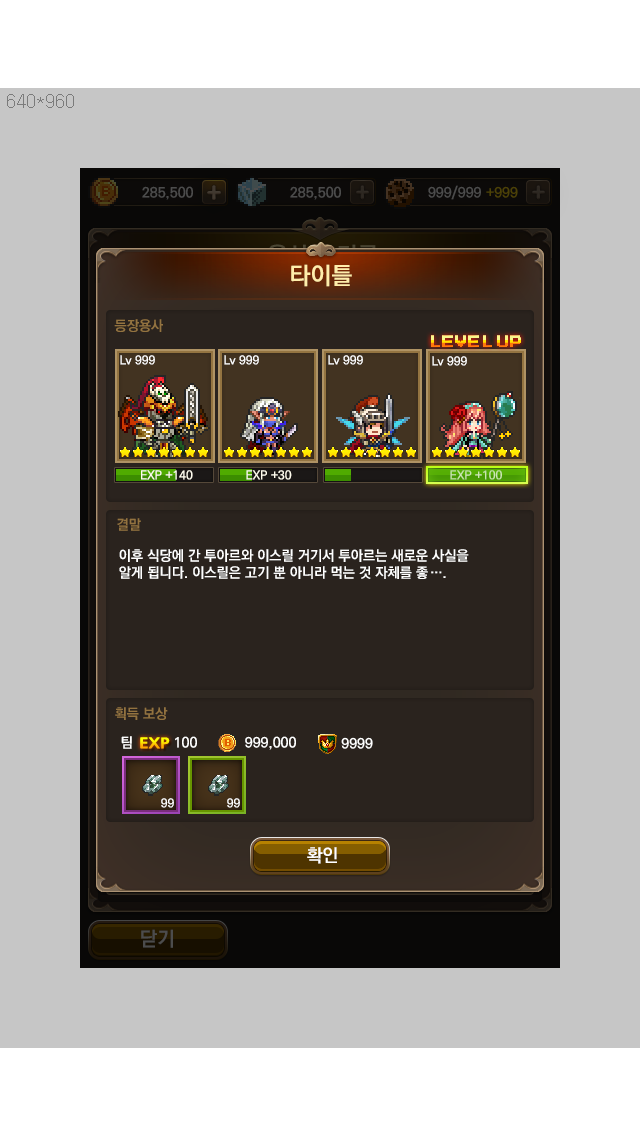
<style>
.page{position:relative;width:640px;height:1136px;background:#c6c6c6}
.page>*{position:absolute;margin:0}
.t1{font:24px "KoPubDotumBold";color:#ffedab}
.t2{font:14px "KoPubDotumBold";color:#937340}
.t3{font:13px "PressStart2P";letter-spacing:0.05em}
.t4{font:13px "PressStart2P";letter-spacing:-0.005em}
.t5{font:12px "KoPubDotumBold";color:#ffffff}
.t6{font:12px "KoPubDotumBold";color:#fffcee}
.t7{font:12px "KoPubDotumBold";color:#cce7b2}
.t8{font:14px "KoPubDotumBold";color:#ffffff}
.t9{font:14px "NanumGothicExtraBold";scale:1.2 1}
.t10{font:18px "KoPubDotumBold";color:#ffffff}
</style>
<div class="page">
<p class="t1" style="left:291px;top:264px;width:61px;height:23px">타이틀</p>
<p class="t2" style="left:114px;top:319px;width:49px;height:13px">등장용사</p>
<p class="t3" style="left:431px;top:335px;width:90px;height:11px">LEVE<span class="t4">L </span>UP</p>
<p class="t3" style="left:431px;top:336px;width:90px;height:11px">LEVE<span class="t4">L </span>UP</p>
<p class="t5" style="left:120px;top:355px;width:35px;height:10px">Lv 999</p>
<p class="t5" style="left:224px;top:355px;width:35px;height:10px">Lv 999</p>
<p class="t5" style="left:328px;top:355px;width:35px;height:10px">Lv 999</p>
<p class="t5" style="left:432px;top:356px;width:35px;height:10px">Lv 999</p>
<p class="t6" style="left:141px;top:470px;width:52px;height:10px">EXP +140</p>
<p class="t6" style="left:246px;top:470px;width:46px;height:10px">EXP +30</p>
<p class="t7" style="left:450px;top:470px;width:52px;height:10px">EXP +100</p>
<p class="t2" style="left:117px;top:518px;width:24px;height:13px">결말</p>
<p class="t8" style="left:119px;top:549px;width:350px;height:30px">이후 식당에 간 투아르와 이스릴 거기서 투아르는 새로운 사실을 <br>알게 됩니다. 이스릴은 고기 뿐 아니라 먹는 것 자체를 좋….</p>
<p class="t2" style="left:115px;top:707px;width:53px;height:13px">획득 보상</p>
<p class="t8" style="left:121px;top:736px;width:76px;height:13px">팀          100</p>
<p class="t9" style="left:140px;top:737px;width:30px;height:12px">EXP</p>
<p class="t8" style="left:245px;top:736px;width:51px;height:14px">999,000</p>
<p class="t8" style="left:341px;top:737px;width:32px;height:12px">9999</p>
<p class="t5" style="left:161px;top:798px;width:13px;height:10px">99</p>
<p class="t5" style="left:227px;top:798px;width:13px;height:10px">99</p>
<p class="t10" style="left:307px;top:847px;width:30px;height:17px">확인</p>
</div>
